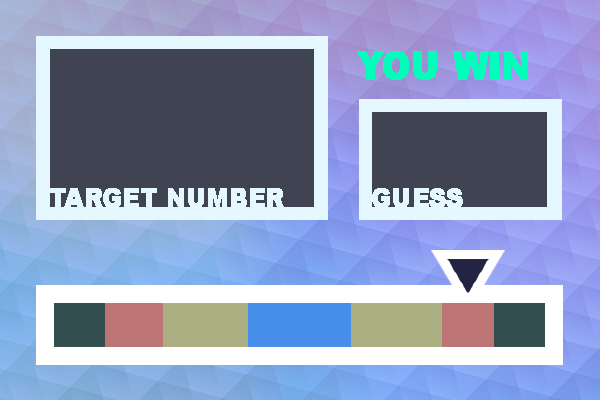
<style>
.page{position:relative;width:600px;height:400px;background:#404351}
.page>*{position:absolute;margin:0}
.t1{font:37.8px "Arial-Black";color:#00ffba;font-weight:bold;scale:0.9 1}
.t2{font:25.8px "Arial-Black";color:#e5f7ff;font-weight:bold;scale:0.91 1}
</style>
<div class="page">
<p class="t1" style="left:357px;top:51px;width:171px;height:29px">YOU WIN</p>
<p class="t2" style="left:50px;top:188px;width:234px;height:20px">TARGET NUMBER</p>
<p class="t2" style="left:372px;top:188px;width:91px;height:20px">GUESS</p>
</div>
